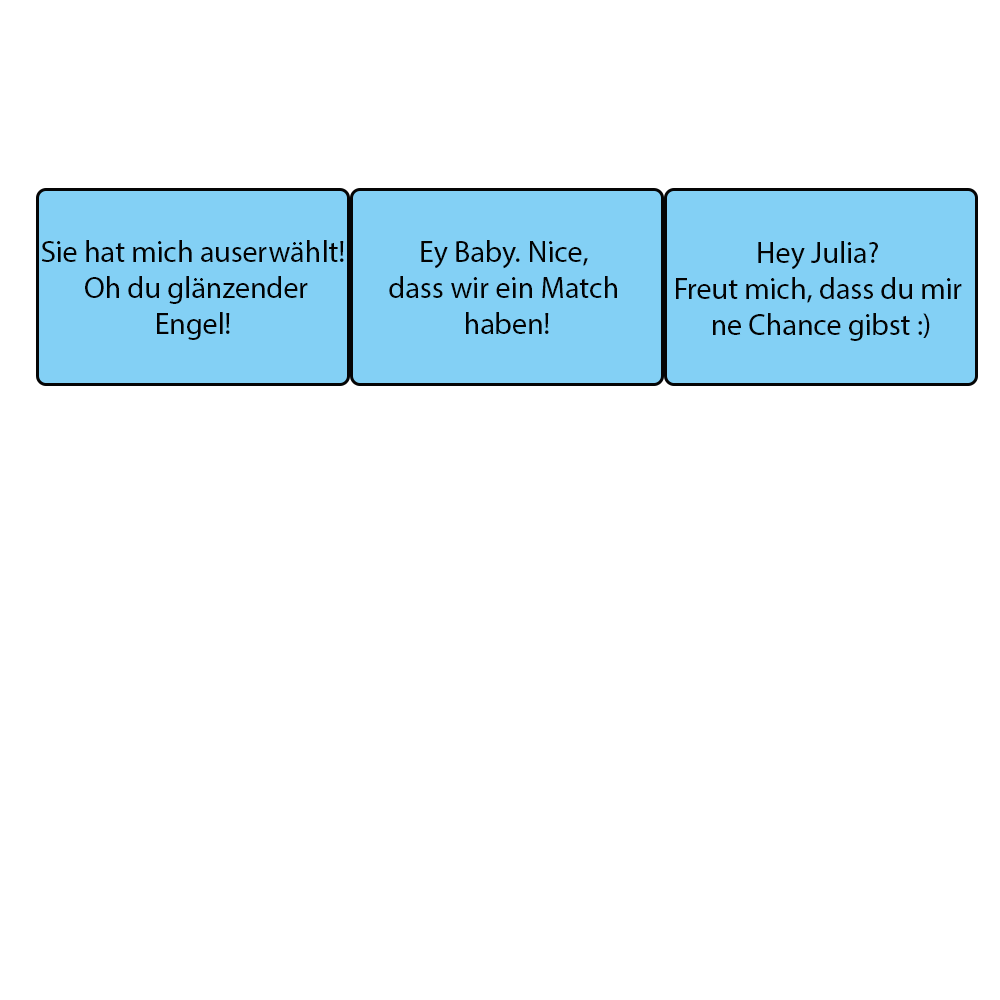
<style>
.page{position:relative;width:1000px;height:1000px;background:#ffffff}
.page>*{position:absolute;margin:0}
.t1{font:30px "MyriadPro-Regular";color:#030303}
</style>
<div class="page">
<p class="t1" style="left:41px;top:240px;width:303px;height:100px;text-align:center">Sie hat mich auserwählt!<br> Oh du glänzender Engel!</p>
<p class="t1" style="left:389px;top:240px;width:228px;height:94px;text-align:center">Ey Baby. Nice, <br>dass wir ein Match <br>haben!</p>
<p class="t1" style="left:676px;top:241px;width:286px;height:100px;text-align:center">Hey Julia? <br>Freut mich, dass du mir <br>ne Chance gibst :)</p>
</div>
